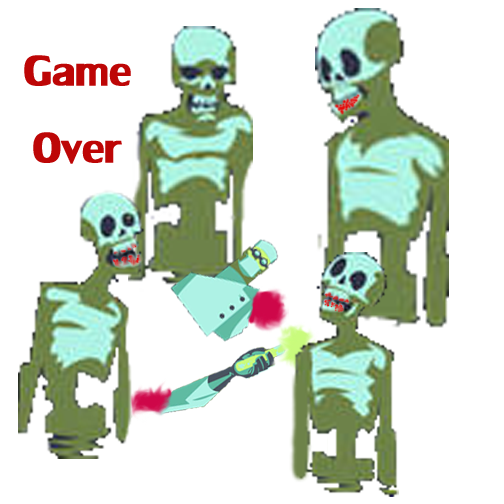
<style>
.page{position:relative;width:504px;height:504px;background:#ffffff}
.page>*{position:absolute;margin:0}
.t1{font:64px "LilyUPC";color:#bd0606;font-weight:bold}
</style>
<div class="page">
<p class="t1" style="left:24px;top:55px;width:107px;height:109px;text-align:center">Game<br>Over</p>
</div>
